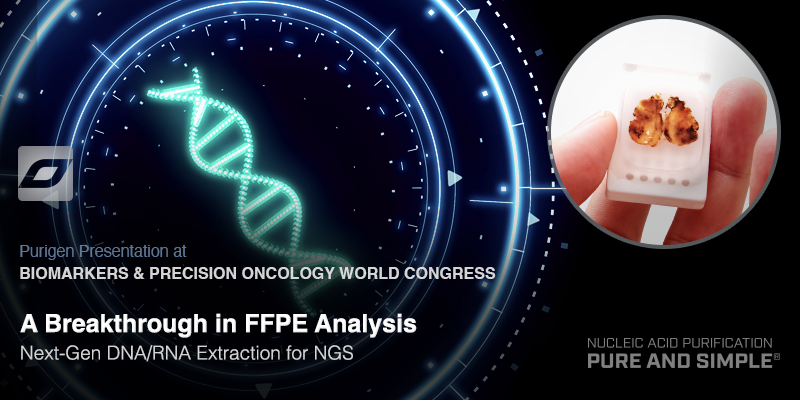
<style>
.page{position:relative;width:800px;height:400px}
.page>*{position:absolute;margin:0}
.t1{font:16px "Helvetica";color:#5d7694}
.t2{font:16px "Helvetica-Bold";color:#d4d4d5;text-transform:uppercase}
.t3{font:19px/27.4px "Helvetica-Light";color:#d6d6d6}
.t4{font:25px/27.4px "Helvetica-Bold";color:#ffffff}
</style>
<div class="page">
<p class="t1" style="left:20px;top:245px;width:167px;height:15px">Purigen Presentation at</p>
<p class="t2" style="left:20px;top:267px;width:476px;height:12px">Biomarkers &amp; Precision Oncology World Congress</p>
<p class="t3" style="left:20px;top:313px;width:397px;height:49px"><span class="t4">A Breakthrough in FFPE Analysis<br></span>Next-Gen DNA/RNA Extraction for NGS</p>
</div>
